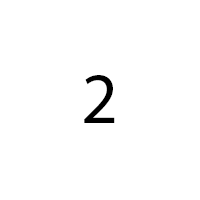
<style>
.page{position:relative;width:200px;height:200px;background:#ffffff}
.page>*{position:absolute;margin:0}
.t1{font:72px "MyriadPro-Regular";color:#000000}
</style>
<div class="page">
<p class="t1" style="left:84px;top:75px;width:31px;height:48px">2</p>
</div>
